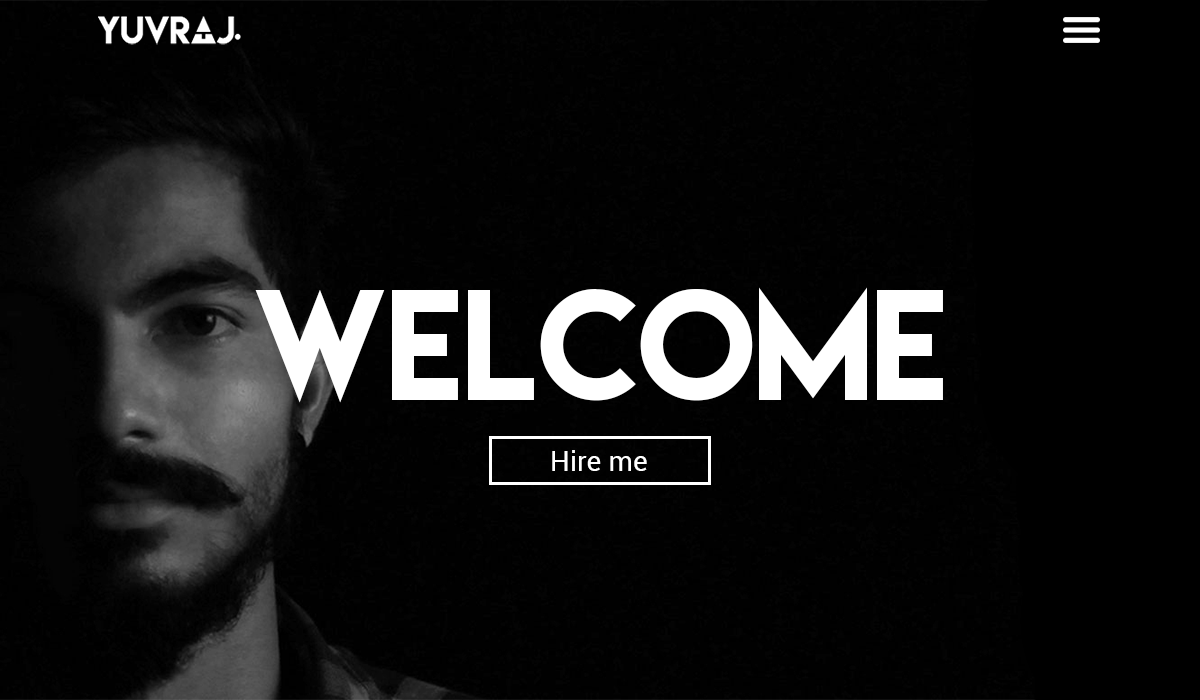
<style>
.page{position:relative;width:1200px;height:700px;background:#010101}
.page>*{position:absolute;margin:0}
.t1{font:140px "LemonMilk";color:#ffffff}
.t2{font:27.8px "Roboto-Regular";color:#ffffff}
</style>
<div class="page">
<p class="t1" style="left:255px;top:287px;width:688px;height:116px">welcome</p>
<p class="t2" style="left:552px;top:450px;width:95px;height:21px">Hire me</p>
</div>
